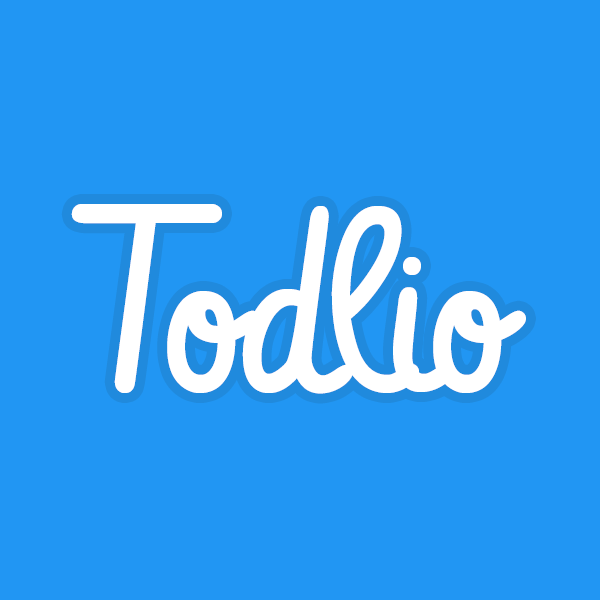
<style>
.page{position:relative;width:600px;height:600px;background:#2196f3}
.page>*{position:absolute;margin:0}
.t1{font:250px "Vibur";letter-spacing:-0.02em;color:#ffffff}
</style>
<div class="page">
<p class="t1" style="left:71px;top:204px;width:455px;height:190px">Todlio</p>
</div>
